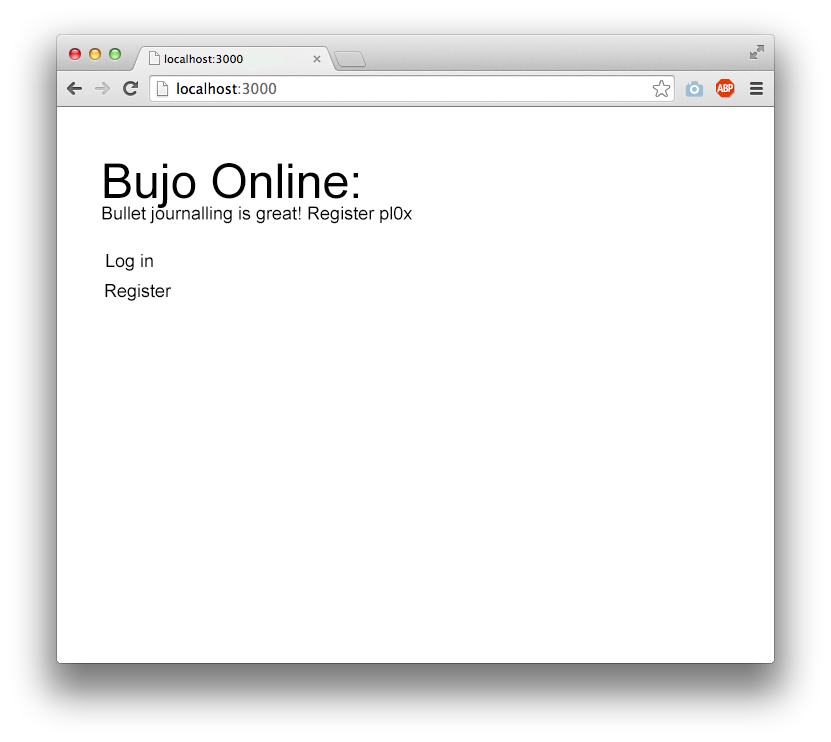
<style>
.page{position:relative;width:831px;height:742px;background:#ffffff}
.page>*{position:absolute;margin:0}
.t1{font:18px "ArialMT";color:#010101}
.t2{font:48px "ArialMT";color:#010101}
.t3{font:18px "ArialMT";color:#000000}
</style>
<div class="page">
<p class="t1" style="left:102px;top:163px;width:310px;height:61px"><span class="t2">Bujo Online:<br></span>Bullet journalling is great! Register pl0x</p>
<p class="t3" style="left:106px;top:254px;width:47px;height:17px">Log in</p>
<p class="t3" style="left:105px;top:284px;width:67px;height:17px">Register</p>
</div>
